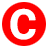
<style>
.page{position:relative;width:48px;height:48px;background:#ffffff}
.page>*{position:absolute;margin:0}
.t1{font:55.6px "Roboto-Medium";letter-spacing:0.04em;color:#ffffff}
</style>
<div class="page">
<p class="t1" style="left:10px;top:8px;width:26px;height:32px">c</p>
</div>
